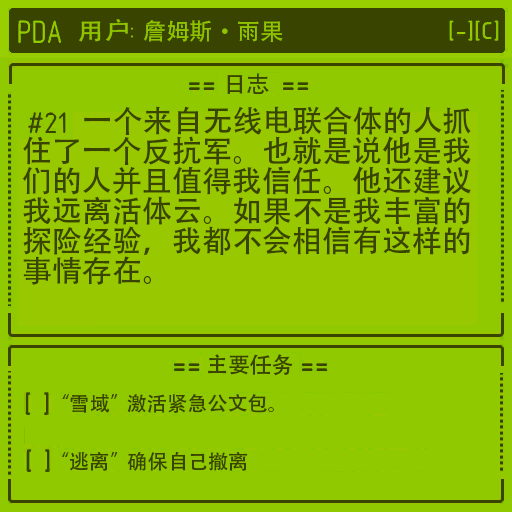
<style>
.page{position:relative;width:512px;height:512px;background:#90c900}
.page>*{position:absolute;margin:0}
.t1{font:30px/30px "AdobeHeitiStd-Regular";color:#384400}
</style>
<div class="page">
<p class="t1" style="left:22px;top:106px;width:449px;height:179px">一个来自无线电联合体的人抓<br>住了一个反抗军。也就是说他是我<br>们的人并且值得我信任。他还建议<br>我远离活体云。如果不是我丰富的<br>探险经验，我都不会相信有这样的<br>事情存在。</p>
</div>
